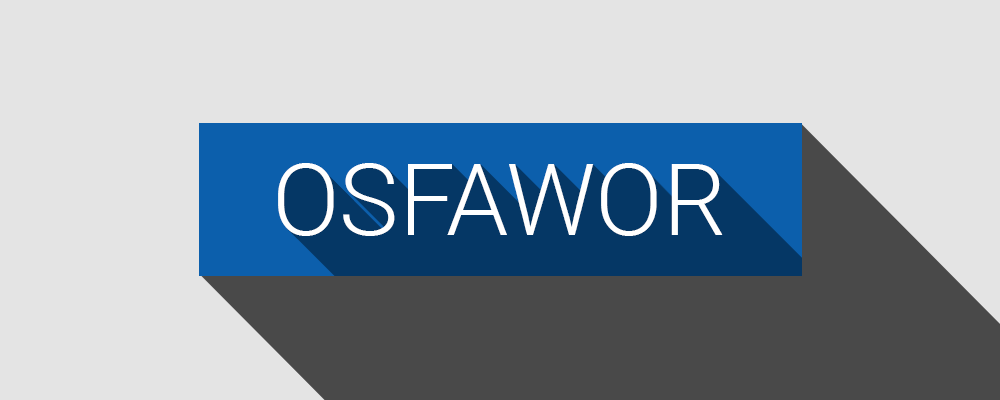
<style>
.page{position:relative;width:1000px;height:400px;background:#e4e4e4}
.page>*{position:absolute;margin:0}
.t1{font:100px "Roboto-Light";color:#ffffff}
</style>
<div class="page">
<p class="t1" style="left:278px;top:163px;width:445px;height:73px">OSFAWOR</p>
</div>
